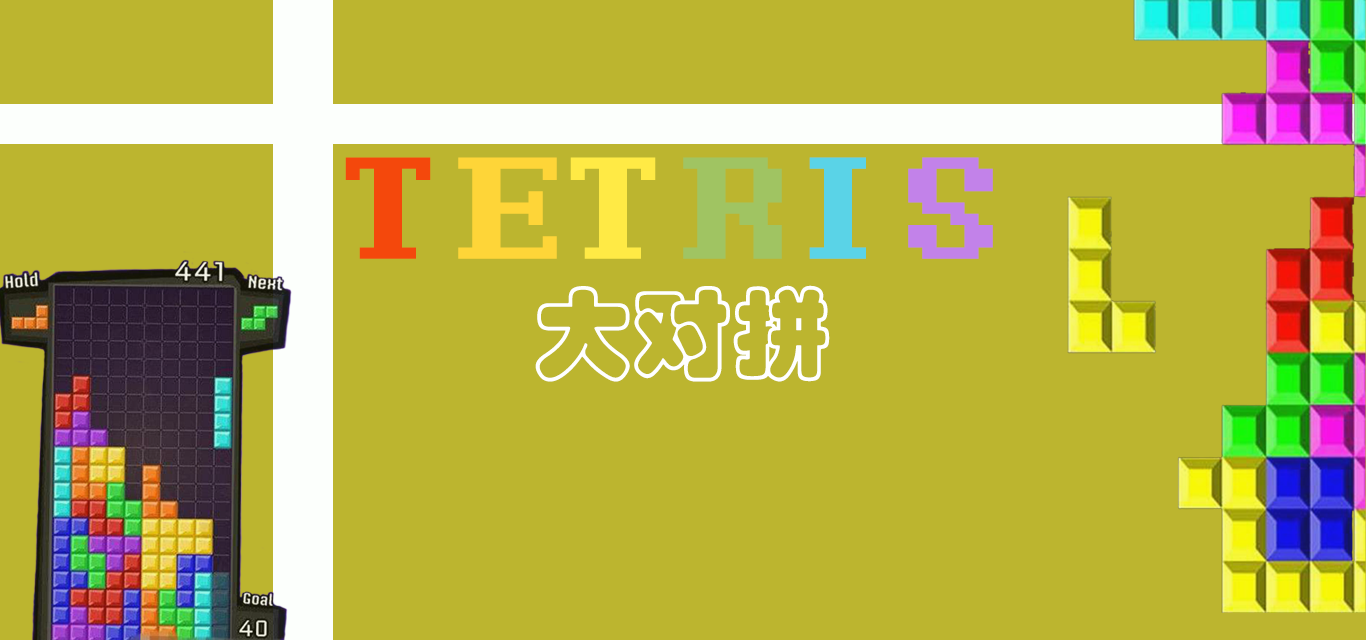
<style>
.page{position:relative;width:1366px;height:640px;background:#bcb52f}
.page>*{position:absolute;margin:0}
.t1{font:180px "Terminal";color:#f4480c}
.t2{font:180px "Terminal";color:#fed538}
.t3{font:180px "Terminal";color:#ffea45}
.t4{font:180px "Terminal";color:#a0c462}
.t5{font:180px "Terminal";color:#5ad3e7}
.t6{font:180px "Terminal";color:#c282e9}
.t7{font:100px "STCaiyun";color:#ffffff}
</style>
<div class="page">
<p class="t1" style="left:345px;top:157px;width:648px;height:102px">T<span class="t2">E</span><span class="t3">T</span><span class="t4">R</span><span class="t5">I</span><span class="t6">S</span></p>
<p class="t7" style="left:535px;top:285px;width:295px;height:97px">大对拼</p>
</div>
